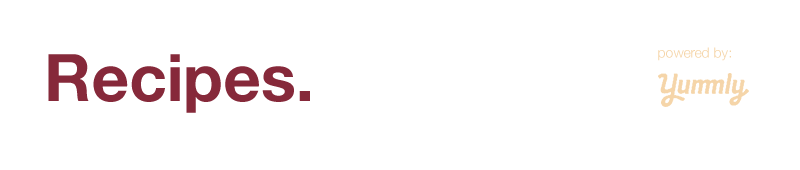
<style>
.page{position:relative;width:800px;height:170px;background:#ffffff}
.page>*{position:absolute;margin:0}
.t1{font:65.5px "HelveticaNeue-Bold";color:#86293a}
.t2{font:14.1px "HelveticaNeue-Light";color:#f5d5a9}
</style>
<div class="page">
<p class="t1" style="left:48px;top:54px;width:262px;height:59px">Recipes.</p>
<p class="t2" style="left:658px;top:47px;width:73px;height:14px">powered by:</p>
</div>
